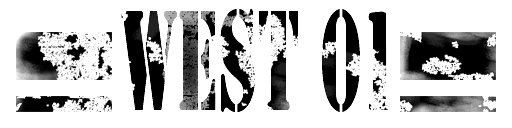
<style>
.page{position:relative;width:512px;height:128px;background:#ffffff}
.page>*{position:absolute;margin:0}
.t1{font:132px "StencilStd";scale:0.47 1}
</style>
<div class="page">
<p class="t1" style="left:121px;top:9px;width:270px;height:104px">WEST 01</p>
</div>
